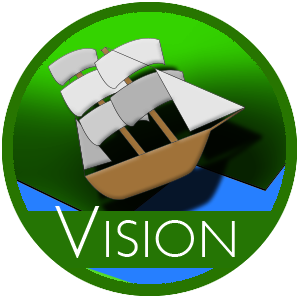
<style>
.page{position:relative;width:300px;height:300px;background:#ffffff}
.page>*{position:absolute;margin:0}
.t1{font:75px "GillSans-Light";letter-spacing:0.03em;color:#ffffff;font-variant:small-caps}
</style>
<div class="page">
<p class="t1" style="left:55px;top:206px;width:180px;height:52px">Vision</p>
</div>
